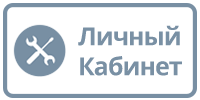
<style>
.page{position:relative;width:200px;height:100px;background:#ffffff}
.page>*{position:absolute;margin:0}
.t1{font:25px "OpenSans-Bold";letter-spacing:-0.04em;color:#7990a4}
</style>
<div class="page">
<p class="t1" style="left:78px;top:25px;width:104px;height:51px">Личный<br>Кабинет</p>
</div>
